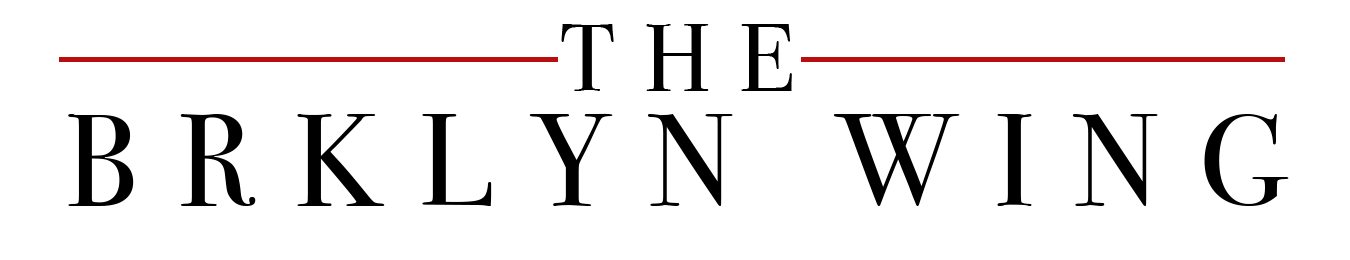
<style>
.page{position:relative;width:1350px;height:260px;background:#ffffff}
.page>*{position:absolute;margin:0}
.t1{font:94px "BodoniSvtyTwoSCITCTT-Book";letter-spacing:0.3em;color:#000000}
.t2{font:130px "BodoniSvtyTwoSCITCTT-Book";letter-spacing:0.3em;color:#000000}
</style>
<div class="page">
<p class="t1" style="left:561px;top:24px;width:231px;height:67px">THE</p>
<p class="t2" style="left:68px;top:113px;width:1221px;height:93px">BRKLYN WING</p>
</div>
